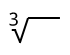
<style>
.page{position:relative;width:70px;height:55px;background:#ffffff}
.page>*{position:absolute;margin:0}
.t1{font:18px "DroidSans";color:#000000}
</style>
<div class="page">
<p class="t1" style="left:9px;top:12px;width:9px;height:14px">3</p>
</div>
